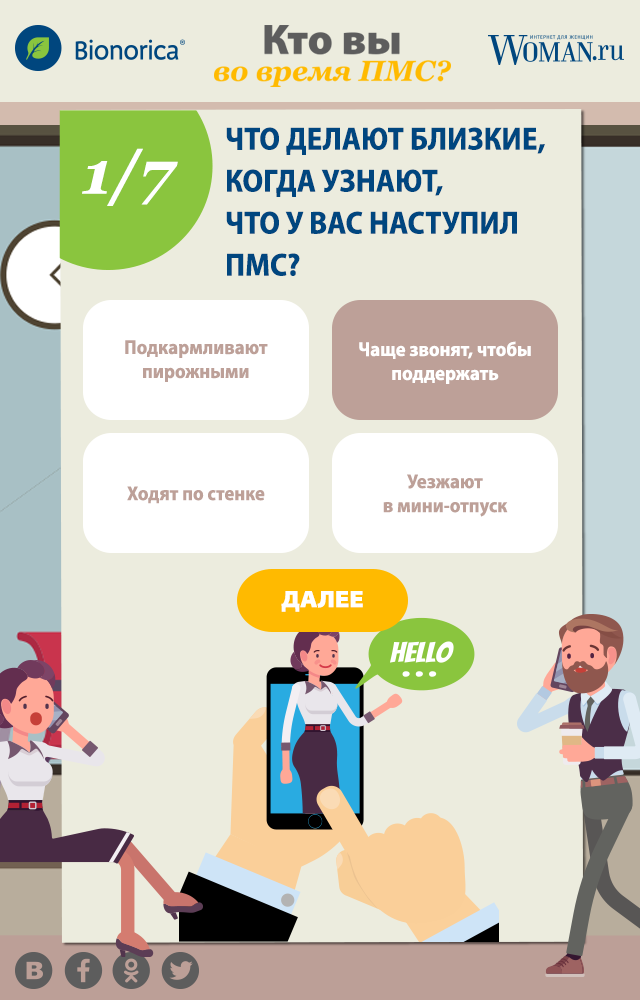
<style>
.page{position:relative;width:640px;height:1000px;background:#ececde}
.page>*{position:absolute;margin:0}
.t1{font:32px/42px "MyriadPro-BoldSemiCn";color:#00467f;text-transform:uppercase}
.t2{font:60px "Georgia-BoldItalic";color:#ffffff}
.t3{font:20px "MyriadPro-BoldSemiCn";color:#bda098}
.t4{font:20px "MyriadPro-BoldSemiCn";color:#ffffff}
.t5{font:24px "MyriadPro-BlackSemiExt";color:#ffffff;text-transform:uppercase}
</style>
<div class="page">
<p class="t1" style="left:226px;top:127px;width:319px;height:149px">Что делают близкие, когда узнают, <br>что у вас наступил ПМС?</p>
<p class="t2" style="left:82px;top:148px;width:96px;height:58px">1/7</p>
<p class="t3" style="left:125px;top:340px;width:143px;height:42px;text-align:center">Подкармливают пирожными</p>
<p class="t4" style="left:359px;top:341px;width:172px;height:43px;text-align:center">Чаще звонят, чтобы поддержать</p>
<p class="t3" style="left:127px;top:486px;width:138px;height:18px">Ходят по стенке</p>
<p class="t3" style="left:383px;top:474px;width:125px;height:43px;text-align:center">Уезжают <br>в мини-отпуск</p>
<p class="t5" style="left:281px;top:591px;width:82px;height:21px">далее</p>
</div>
